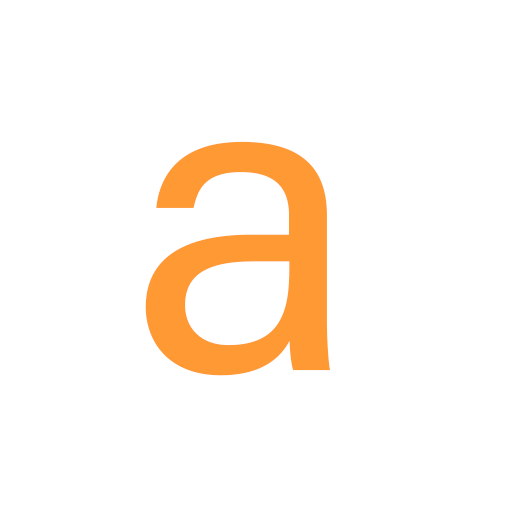
<style>
.page{position:relative;width:512px;height:512px;background:#ffffff}
.page>*{position:absolute;margin:0}
.t1{font:439.4px "AcuminConcept-Regular";color:#ff9933}
</style>
<div class="page">
<p class="t1" style="left:145px;top:141px;width:185px;height:235px">a</p>
</div>
